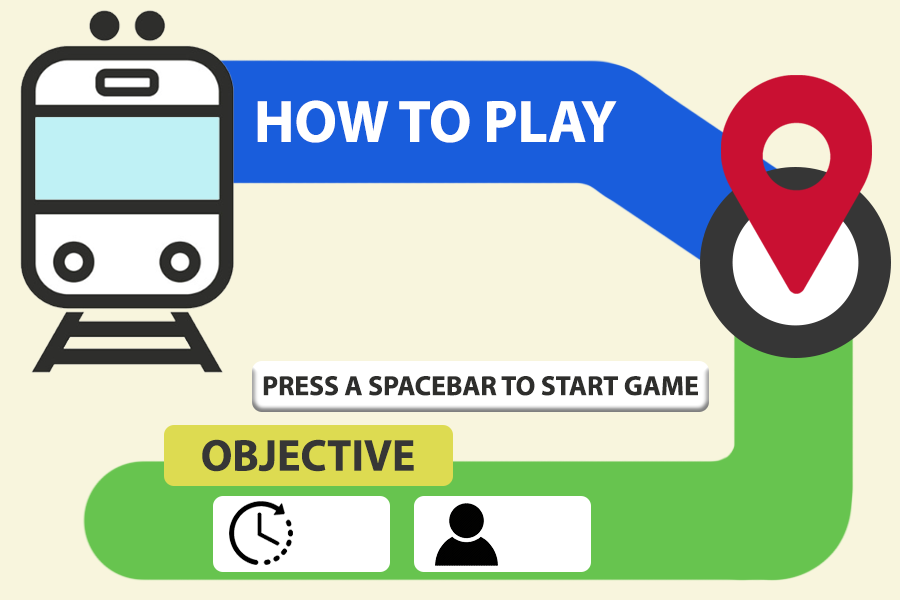
<style>
.page{position:relative;width:900px;height:600px;background:#f8f5dd}
.page>*{position:absolute;margin:0}
.t1{font:60.1px "MyriadPro-Bold";color:#ffffff}
.t2{font:27.7px "MyriadPro-Bold";color:#2e2e2c}
.t3{font:44.9px "MyriadPro-Bold";color:#363636}
</style>
<div class="page">
<p class="t1" style="left:257px;top:100px;width:360px;height:43px">HOW TO PLAY</p>
<p class="t2" style="left:263px;top:376px;width:435px;height:20px">PRESS A SPACEBAR TO START GAME</p>
<p class="t3" style="left:202px;top:439px;width:212px;height:33px">OBJECTIVE</p>
</div>
